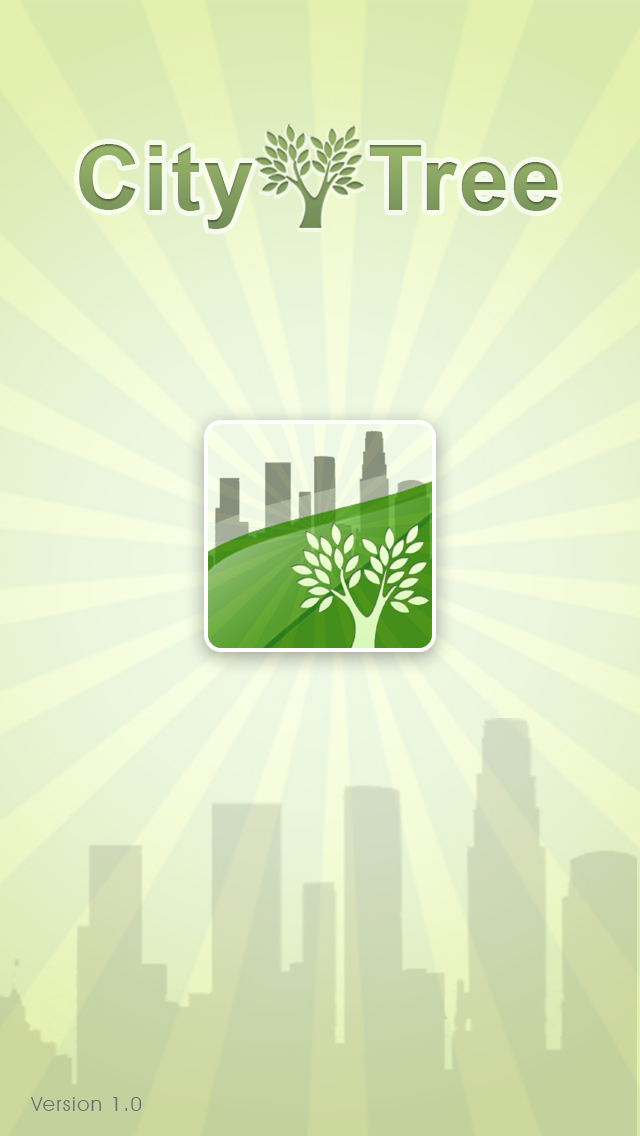
<style>
.page{position:relative;width:640px;height:1136px}
.page>*{position:absolute;margin:0}
.t1{font:89.6px "Arial-BoldMT";letter-spacing:0.03em;color:#84a05f}
.t2{font:20px "AvantGardeITCbyBT-Book";letter-spacing:0.075em;color:#6e6e6e}
</style>
<div class="page">
<p class="t1" style="left:79px;top:144px;width:479px;height:85px">City    Tree</p>
<p class="t2" style="left:30px;top:1097px;width:112px;height:14px">Version 1.0</p>
</div>
